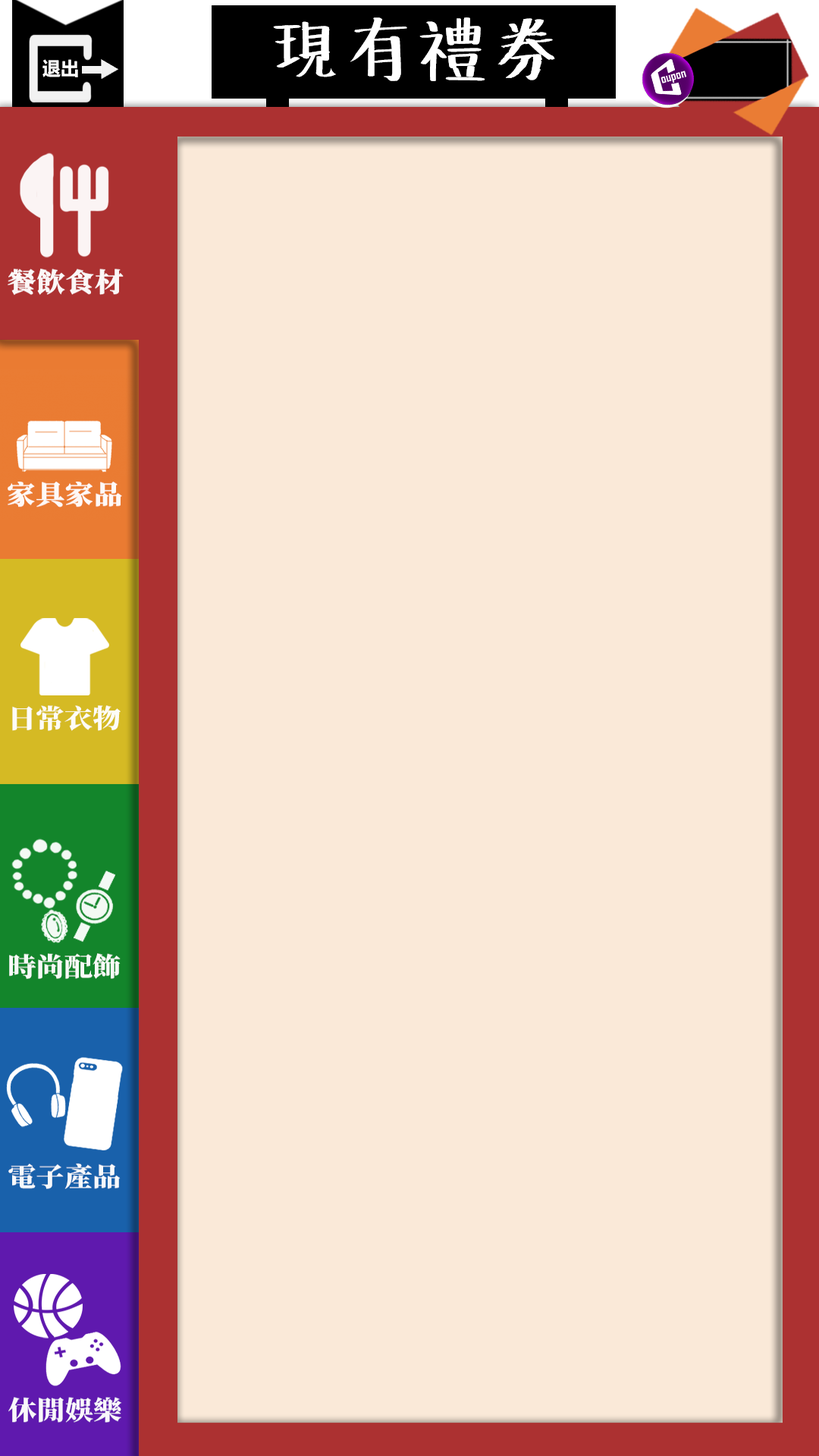
<style>
.page{position:relative;width:819px;height:1456px;background:#fae9d8}
.page>*{position:absolute;margin:0}
.t1{font:68.8px "HanyiSentyChalkOriginal";color:#ffffff}
.t2{font:18.3px "MicrosoftYaHei-Bold";color:#ffffff}
.t3{font:26.3px "SourceHanSerifSC-Heavy";color:#ffffff;font-weight:bold;scale:1.08 1}
.t4{font:26.3px "SourceHanSerifSC-Heavy";color:#ffffff;scale:1.08 1}
</style>
<div class="page">
<p class="t1" style="left:273px;top:17px;width:282px;height:64px">現有禮券</p>
<p class="t2" style="left:42px;top:59px;width:36px;height:18px">退出</p>
<p class="t3" style="left:8px;top:268px;width:116px;height:27px">餐飲食材</p>
<p class="t3" style="left:8px;top:482px;width:114px;height:25px">家具家品</p>
<p class="t4" style="left:12px;top:705px;width:109px;height:26px">日常衣物</p>
<p class="t4" style="left:9px;top:953px;width:112px;height:26px">時尚配飾</p>
<p class="t4" style="left:8px;top:1163px;width:113px;height:26px">電子產品</p>
<p class="t4" style="left:8px;top:1397px;width:114px;height:26px">休閒娛樂</p>
</div>
